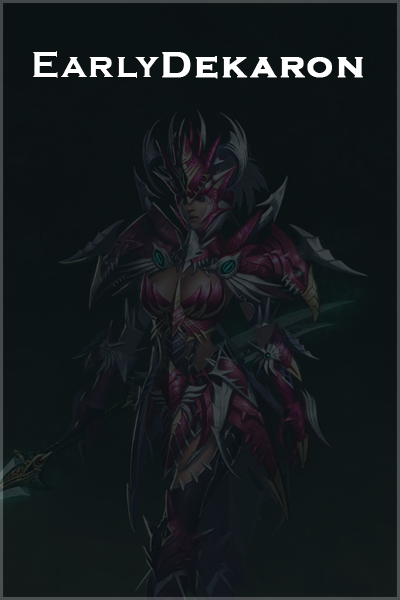
<style>
.page{position:relative;width:400px;height:600px}
.page>*{position:absolute;margin:0}
.t1{font:37px "CopperplateGothic-Bold";letter-spacing:0.05em;color:#ffffff;font-weight:bold}
.t2{font:37px "CopperplateGothic-Bold";letter-spacing:0.05em;color:#ffffff}
</style>
<div class="page">
<p class="t1" style="left:33px;top:51px;width:330px;height:28px"><span class="t2">Early</span>Dekaron</p>
</div>
